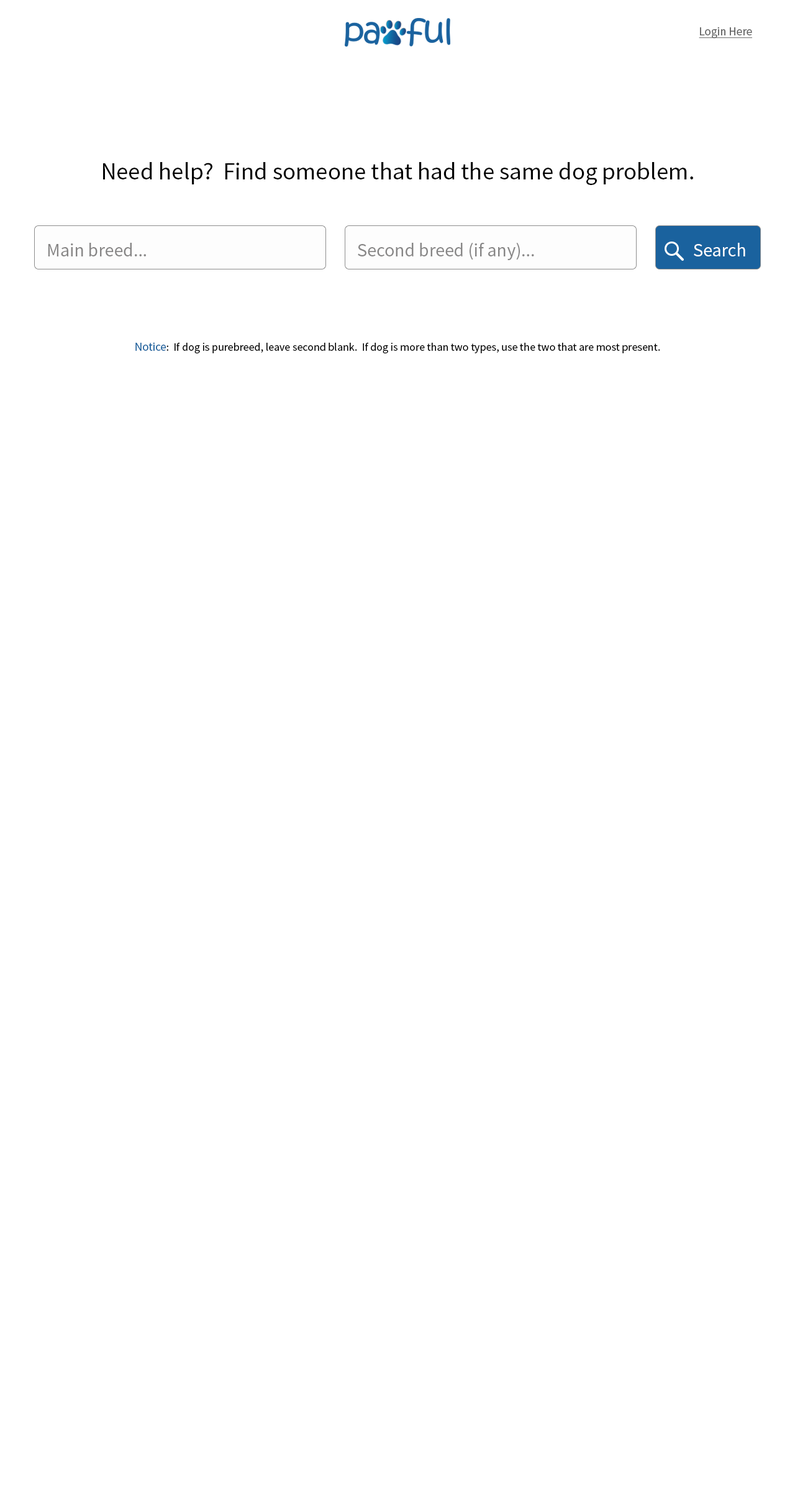
<style>
.page{position:relative;width:795px;height:1500px;background:#ffffff}
.page>*{position:absolute;margin:0}
.t1{font:11.8px "SourceSansPro-Regular";color:#636363;text-decoration:underline}
.t2{font:24.2px "SourceSansPro-Regular";color:#000000}
.t3{font:18.6px "SourceSansPro-Regular";color:#878686}
.t4{font:18.6px "SourceSansPro-Regular";color:#ffffff}
.t5{font:11.2px "SourceSansPro-Regular";color:#000000}
.t6{font:11.8px "SourceSansPro-Regular";color:#1a629e}
</style>
<div class="page">
<p class="t1" style="left:699px;top:27px;width:54px;height:11px">Login Here</p>
<p class="t2" style="left:103px;top:162px;width:590px;height:23px">Need help?  Find someone that had the same dog problem.</p>
<p class="t3" style="left:48px;top:243px;width:98px;height:13px">Main breed...</p>
<p class="t3" style="left:358px;top:243px;width:176px;height:17px">Second breed (if any)...</p>
<p class="t4" style="left:694px;top:243px;width:51px;height:13px">Search</p>
<p class="t5" style="left:135px;top:342px;width:525px;height:12px"><span class="t6">Notice</span>:  If dog is purebreed, leave second blank.  If dog is more than two types, use the two that are most present.</p>
</div>
